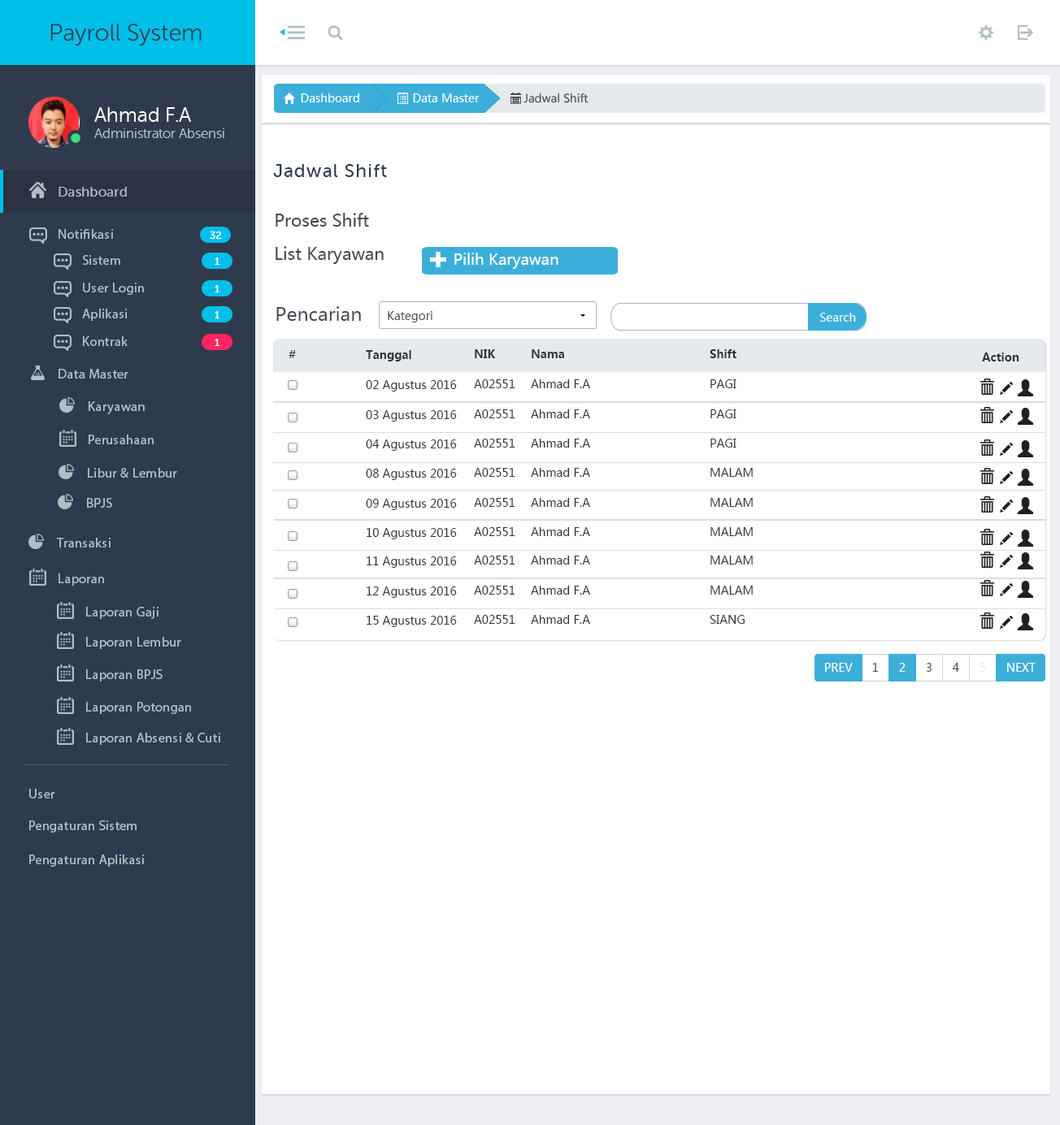
<style>
.page{position:relative;width:1060px;height:1125px;background:#ffffff}
.page>*{position:absolute;margin:0}
.t1{font:23.7px "MuseoSansRounded-300";color:#2f3b4c}
.t2{font:11.4px "MicrosoftYaHei";color:#ffffff}
.t3{font:11.2px "MicrosoftYaHei";color:#434a54}
.t4{font:13.5px "MuseoSansRounded-300";color:#b0bec5}
.t5{font:20.3px "MuseoSansRounded-300";color:#ffffff}
.t6{font:18.6px "MuseoSans-500";letter-spacing:0.04em;color:#2f3b4c}
.t7{font:13.5px "MuseoSans-500";letter-spacing:0.02em;color:#b0bec5}
.t8{font:16.9px "MicrosoftYaHei";color:#434a54}
.t9{font:13.5px "MyriadPro-Regular";letter-spacing:0.02em;color:#b0bec5}
.t10{font:10.2px "MuseoSans-500";letter-spacing:0.02em;color:#ffffff}
.t11{font:15.2px "MicrosoftYaHei";color:#ffffff}
.t12{font:18.6px "MicrosoftYaHei";color:#434a54}
.t13{font:11.4px "MicrosoftYaHei";color:#434a54}
.t14{font:11.4px "MicrosoftYaHei-Bold";color:#333333}
.t15{font:11.4px "MicrosoftYaHei";color:#333333}
.t16{font:11.4px "MicrosoftYaHei";color:#e6e9ed}
</style>
<div class="page">
<p class="t1" style="left:50px;top:24px;width:152px;height:22px">Payroll System</p>
<p class="t2" style="left:301px;top:93px;width:58px;height:9px">Dashboard</p>
<p class="t2" style="left:413px;top:93px;width:66px;height:9px">Data Master</p>
<p class="t3" style="left:523px;top:93px;width:65px;height:10px">Jadwal Shift</p>
<p class="t4" style="left:94px;top:107px;width:130px;height:31px"><span class="t5">Ahmad F.A <br></span>Administrator Absensi</p>
<p class="t6" style="left:273px;top:164px;width:114px;height:13px">Jadwal Shift</p>
<p class="t7" style="left:59px;top:187px;width:68px;height:10px">Dashboard</p>
<p class="t8" style="left:275px;top:213px;width:94px;height:14px">Proses Shift</p>
<p class="t9" style="left:59px;top:229px;width:54px;height:10px">Notifikasi</p>
<p class="t10" style="left:210px;top:232px;width:12px;height:7px">32</p>
<p class="t9" style="left:82px;top:255px;width:38px;height:10px">Sistem</p>
<p class="t10" style="left:215px;top:258px;width:5px;height:7px">1</p>
<p class="t8" style="left:275px;top:246px;width:109px;height:18px">List Karyawan</p>
<p class="t11" style="left:454px;top:253px;width:104px;height:16px">Pilih Karyawan</p>
<p class="t9" style="left:83px;top:283px;width:61px;height:12px">User Login</p>
<p class="t10" style="left:215px;top:285px;width:5px;height:8px">1</p>
<p class="t9" style="left:82px;top:309px;width:46px;height:12px">Aplikasi</p>
<p class="t10" style="left:215px;top:311px;width:5px;height:8px">1</p>
<p class="t12" style="left:276px;top:306px;width:85px;height:15px">Pencarian</p>
<p class="t13" style="left:388px;top:311px;width:44px;height:12px">Kategori</p>
<p class="t2" style="left:820px;top:313px;width:36px;height:9px">Search</p>
<p class="t9" style="left:83px;top:336px;width:45px;height:10px">Kontrak</p>
<p class="t10" style="left:215px;top:339px;width:5px;height:7px">1</p>
<p class="t14" style="left:288px;top:350px;width:8px;height:8px">#</p>
<p class="t14" style="left:366px;top:350px;width:45px;height:12px">Tanggal</p>
<p class="t14" style="left:475px;top:349px;width:21px;height:9px">NIK</p>
<p class="t14" style="left:531px;top:349px;width:33px;height:9px">Nama</p>
<p class="t14" style="left:709px;top:349px;width:27px;height:9px">Shift</p>
<p class="t14" style="left:982px;top:353px;width:37px;height:9px">Action</p>
<p class="t9" style="left:59px;top:369px;width:69px;height:10px">Data Master</p>
<p class="t15" style="left:366px;top:380px;width:91px;height:12px">02 Agustus 2016</p>
<p class="t15" style="left:474px;top:379px;width:41px;height:9px">A02551</p>
<p class="t15" style="left:531px;top:379px;width:59px;height:9px">Ahmad F.A</p>
<p class="t15" style="left:710px;top:379px;width:26px;height:9px">PAGI</p>
<p class="t9" style="left:89px;top:401px;width:56px;height:13px">Karyawan</p>
<p class="t15" style="left:366px;top:410px;width:91px;height:12px">03 Agustus 2016</p>
<p class="t15" style="left:474px;top:410px;width:41px;height:8px">A02551</p>
<p class="t15" style="left:531px;top:410px;width:59px;height:8px">Ahmad F.A</p>
<p class="t15" style="left:710px;top:410px;width:26px;height:8px">PAGI</p>
<p class="t9" style="left:89px;top:435px;width:65px;height:9px">Perusahaan</p>
<p class="t15" style="left:366px;top:440px;width:91px;height:11px">04 Agustus 2016</p>
<p class="t15" style="left:474px;top:439px;width:41px;height:9px">A02551</p>
<p class="t15" style="left:531px;top:439px;width:59px;height:9px">Ahmad F.A</p>
<p class="t15" style="left:710px;top:439px;width:26px;height:9px">PAGI</p>
<p class="t9" style="left:88px;top:468px;width:89px;height:10px">Libur &amp; Lembur</p>
<p class="t15" style="left:366px;top:469px;width:91px;height:11px">08 Agustus 2016</p>
<p class="t15" style="left:474px;top:468px;width:41px;height:9px">A02551</p>
<p class="t15" style="left:531px;top:468px;width:59px;height:9px">Ahmad F.A</p>
<p class="t15" style="left:710px;top:468px;width:42px;height:9px">MALAM</p>
<p class="t9" style="left:87px;top:498px;width:25px;height:10px">BPJS</p>
<p class="t15" style="left:366px;top:499px;width:91px;height:11px">09 Agustus 2016</p>
<p class="t15" style="left:474px;top:498px;width:41px;height:9px">A02551</p>
<p class="t15" style="left:531px;top:498px;width:59px;height:9px">Ahmad F.A</p>
<p class="t15" style="left:710px;top:498px;width:42px;height:9px">MALAM</p>
<p class="t15" style="left:366px;top:528px;width:91px;height:12px">10 Agustus 2016</p>
<p class="t15" style="left:474px;top:527px;width:41px;height:9px">A02551</p>
<p class="t15" style="left:531px;top:527px;width:59px;height:9px">Ahmad F.A</p>
<p class="t15" style="left:710px;top:527px;width:42px;height:9px">MALAM</p>
<p class="t9" style="left:56px;top:538px;width:55px;height:10px">Transaksi</p>
<p class="t15" style="left:366px;top:557px;width:91px;height:11px">11 Agustus 2016</p>
<p class="t15" style="left:474px;top:556px;width:41px;height:9px">A02551</p>
<p class="t15" style="left:531px;top:556px;width:59px;height:9px">Ahmad F.A</p>
<p class="t15" style="left:710px;top:556px;width:42px;height:9px">MALAM</p>
<p class="t9" style="left:59px;top:574px;width:45px;height:12px">Laporan</p>
<p class="t15" style="left:366px;top:587px;width:91px;height:11px">12 Agustus 2016</p>
<p class="t15" style="left:474px;top:586px;width:41px;height:9px">A02551</p>
<p class="t15" style="left:531px;top:586px;width:59px;height:9px">Ahmad F.A</p>
<p class="t15" style="left:710px;top:586px;width:42px;height:9px">MALAM</p>
<p class="t9" style="left:86px;top:607px;width:72px;height:12px">Laporan Gaji</p>
<p class="t15" style="left:366px;top:616px;width:91px;height:11px">15 Agustus 2016</p>
<p class="t15" style="left:474px;top:615px;width:41px;height:9px">A02551</p>
<p class="t15" style="left:531px;top:615px;width:59px;height:9px">Ahmad F.A</p>
<p class="t15" style="left:709px;top:615px;width:35px;height:9px">SIANG</p>
<p class="t9" style="left:86px;top:637px;width:95px;height:12px">Laporan Lembur</p>
<p class="t2" style="left:825px;top:663px;width:27px;height:9px">PREV</p>
<p class="t13" style="left:872px;top:663px;width:6px;height:9px">1</p>
<p class="t2" style="left:899px;top:663px;width:6px;height:9px">2</p>
<p class="t13" style="left:926px;top:663px;width:5px;height:9px">3</p>
<p class="t13" style="left:952px;top:663px;width:7px;height:9px">4</p>
<p class="t16" style="left:979px;top:663px;width:6px;height:9px">5</p>
<p class="t2" style="left:1007px;top:663px;width:28px;height:9px">NEXT</p>
<p class="t9" style="left:86px;top:670px;width:77px;height:12px">Laporan BPJS</p>
<p class="t9" style="left:86px;top:702px;width:105px;height:12px">Laporan Potongan</p>
<p class="t9" style="left:86px;top:733px;width:134px;height:12px">Laporan Absensi &amp; Cuti</p>
<p class="t9" style="left:29px;top:789px;width:26px;height:10px">User</p>
<p class="t9" style="left:29px;top:821px;width:108px;height:12px">Pengaturan Sistem</p>
<p class="t9" style="left:29px;top:855px;width:115px;height:12px">Pengaturan Aplikasi</p>
</div>
